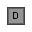
<style>
.page{position:relative;width:32px;height:32px;background:#ffffff}
.page>*{position:absolute;margin:0}
.t1{font:8px "KenPixel";color:#010101}
</style>
<div class="page">
<p class="t1" style="left:13px;top:12px;width:5px;height:7px">D</p>
</div>
